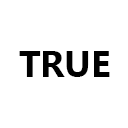
<style>
.page{position:relative;width:128px;height:128px;background:#ffffff}
.page>*{position:absolute;margin:0}
.t1{font:36.9px "Gadugi-Bold";color:#000000}
</style>
<div class="page">
<p class="t1" style="left:19px;top:51px;width:91px;height:26px">TRUE</p>
</div>
